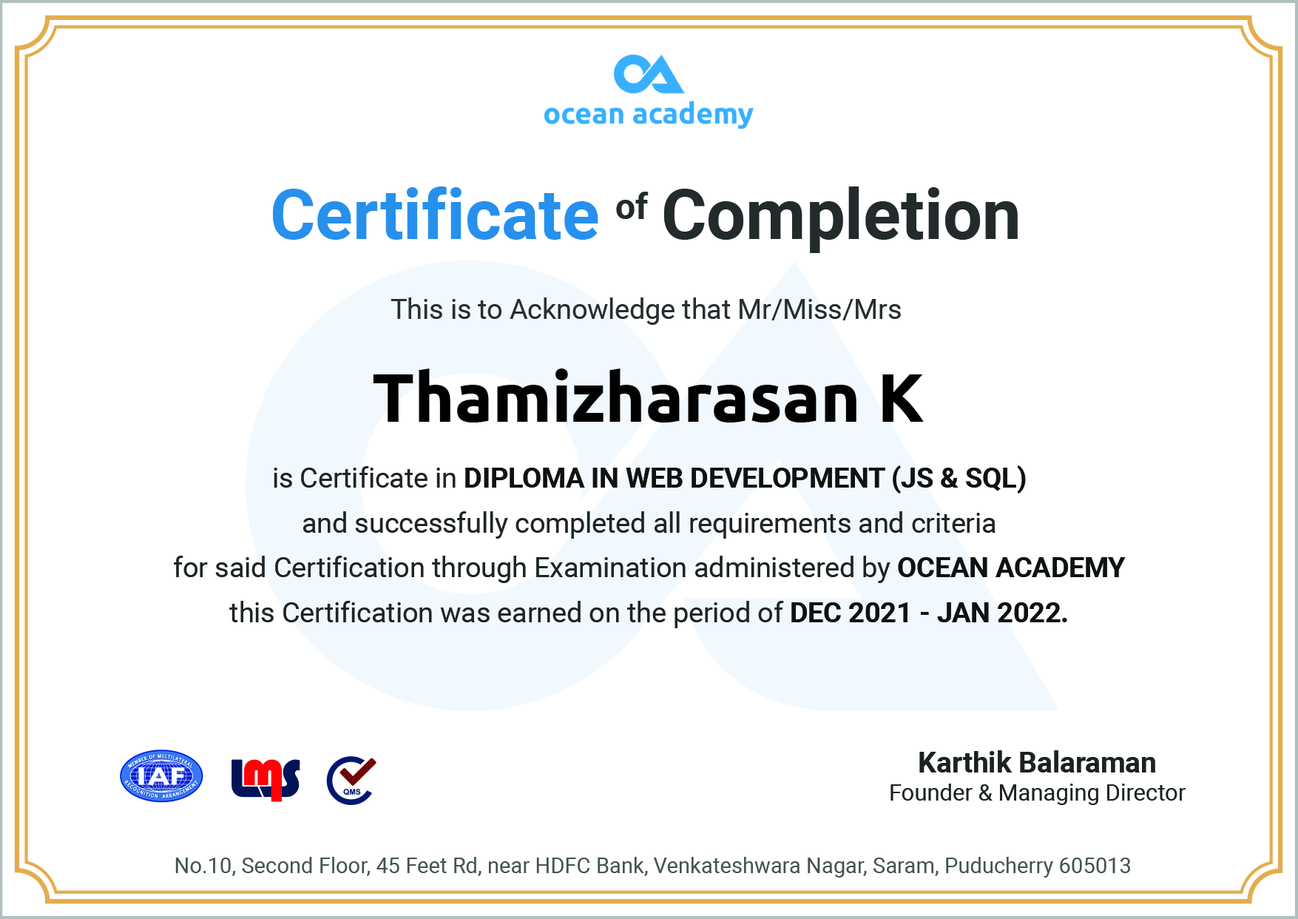
<style>
.page{position:relative;width:1298px;height:919px;background:#ffffff}
.page>*{position:absolute;margin:0}
.t1{font:69.4px "Roboto-Bold";color:#2690ec}
.t2{font:69.4px "Roboto-Bold";color:#232a2b}
.t3{font:35.2px "Roboto-Bold";color:#232a2b}
.t4{font:27.7px "Roboto-Regular";color:#262f30}
.t5{font:68.4px "Ubuntu-Bold";color:#000000}
.t6{font:27.7px/44.7px "Roboto-Regular";color:#1e2425}
.t7{font:27.7px/44.7px "Roboto-Bold";color:#0f1213}
.t8{font:22.9px "Roboto-Regular";color:#1c2122}
.t9{font:28.7px "Roboto-Bold";color:#1c2122}
.t10{font:21.6px "Roboto-Regular";color:#445254}
</style>
<div class="page">
<p class="t1" style="left:273px;top:186px;width:745px;height:67px">Certificate     <span class="t2">Completion</span></p>
<p class="t3" style="left:616px;top:192px;width:33px;height:27px">of</p>
<p class="t4" style="left:391px;top:297px;width:510px;height:28px">This is to Acknowledge that Mr/Miss/Mrs</p>
<p class="t5" style="left:373px;top:368px;width:551px;height:54px">Thamizharasan K</p>
<p class="t6" style="left:174px;top:465px;width:952px;height:163px;text-align:center">is Certificate in <span class="t7">DIPLOMA IN WEB DEVELOPMENT (JS &amp; SQL) <br></span>and successfully completed all requirements and criteria<br>for said Certification through Examination administered by <span class="t7">OCEAN ACADEMY </span>this Certification was earned on the period of <span class="t7">DEC 2021 - JAN 2022.</span></p>
<p class="t8" style="left:891px;top:750px;width:295px;height:55px;text-align:center"><span class="t9">Karthik Balaraman<br></span>Founder &amp; Managing Director</p>
<p class="t10" style="left:175px;top:856px;width:955px;height:21px">No.10, Second Floor, 45 Feet Rd, near HDFC Bank, Venkateshwara Nagar, Saram, Puducherry 605013</p>
</div>
